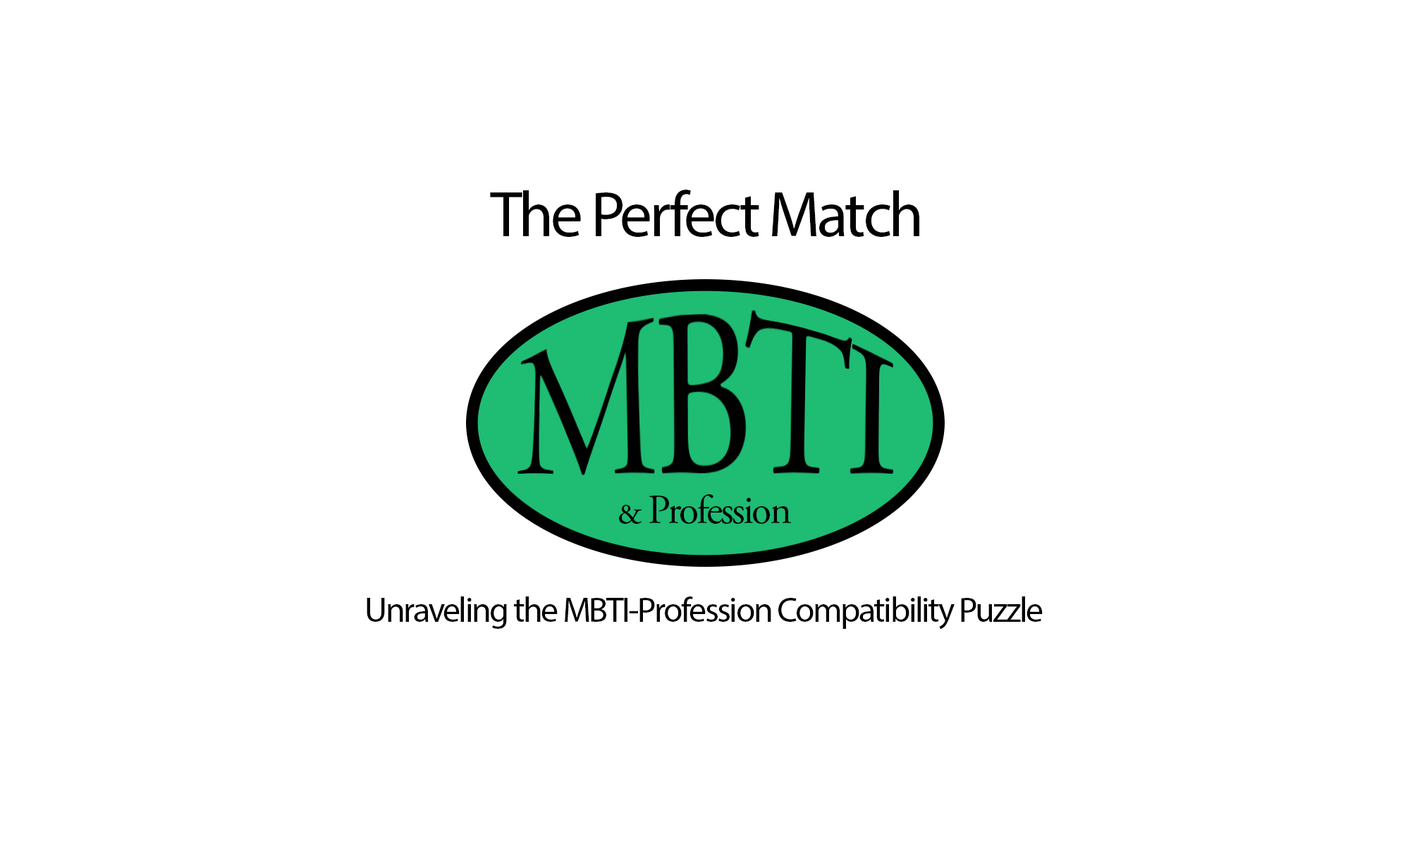
<style>
.page{position:relative;width:1410px;height:846px;background:#ffffff}
.page>*{position:absolute;margin:0}
.t1{font:64.6px "MyriadPro-Regular";letter-spacing:-0.05em;color:#000000}
.t2{font:41.1px "AGaramondPro-Regular";letter-spacing:-0.05em;color:#000000}
.t3{font:35.2px "MyriadPro-Regular";letter-spacing:-0.05em;color:#000000}
</style>
<div class="page">
<p class="t1" style="left:490px;top:190px;width:429px;height:47px">The Perfect Match</p>
<p class="t2" style="left:619px;top:494px;width:172px;height:30px">&amp; Profession</p>
<p class="t3" style="left:367px;top:596px;width:676px;height:33px">Unraveling the MBTI-Profession Compatibility Puzzle</p>
</div>
